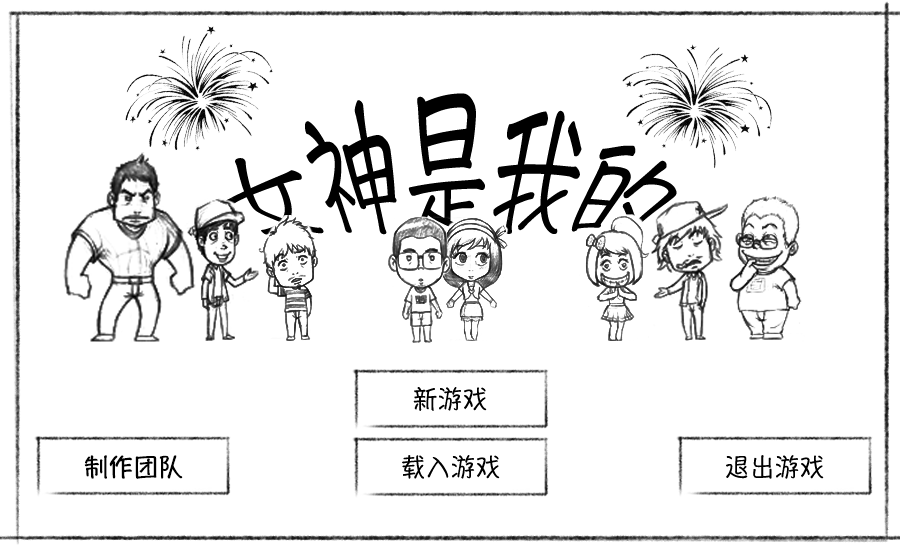
<style>
.page{position:relative;width:900px;height:560px;background:#ffffff}
.page>*{position:absolute;margin:0}
.t1{font:75px "-lfzbbaa";color:#000000}
.t2{font:25px "-lfzbbaa";color:#000000}
.t3{font:25px "HannotateSC-W7";color:#000000}
</style>
<div class="page">
<p class="t1" style="left:223px;top:93px;width:454px;height:142px">女神是我的</p>
<p class="t2" style="left:413px;top:387px;width:74px;height:24px">新游戏</p>
<p class="t3" style="left:84px;top:455px;width:99px;height:24px">制作团队</p>
<p class="t2" style="left:402px;top:455px;width:98px;height:24px">载入游戏</p>
<p class="t2" style="left:726px;top:455px;width:98px;height:24px">退出游戏</p>
</div>
